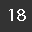
<style>
.page{position:relative;width:32px;height:32px;background:#333333}
.page>*{position:absolute;margin:0}
.t1{font:17.8px "MyriadPro-Regular";color:#ffffff;scale:1.12 1}
</style>
<div class="page">
<p class="t1" style="left:9px;top:9px;width:17px;height:12px">18</p>
</div>
